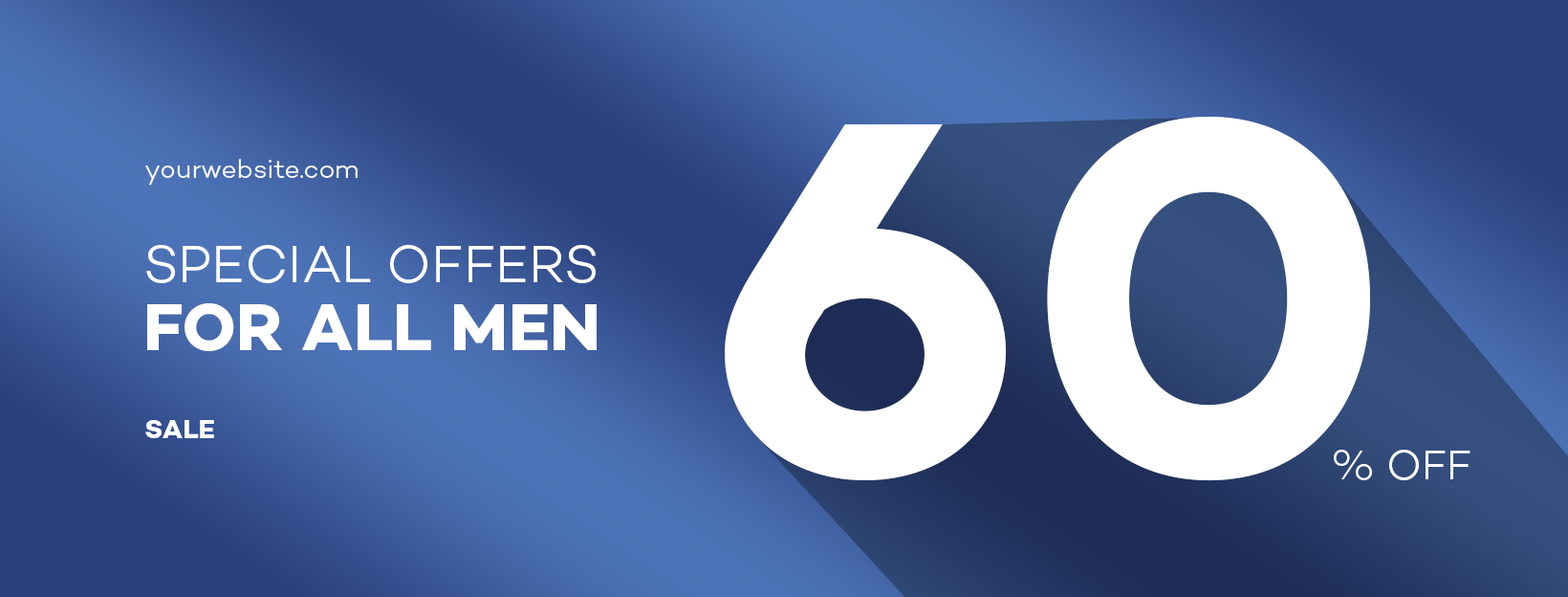
<style>
.page{position:relative;width:1568px;height:597px}
.page>*{position:absolute;margin:0}
.t1{font:511.5px "Campton-BoldDEMO";color:#ffffff;text-transform:uppercase}
.t2{font:26.8px "Campton-LightDEMO";color:#ffffff}
.t3{font:53.5px/67.9px "Campton-LightDEMO";color:#ffffff;text-transform:uppercase}
.t4{font:67.9px/67.9px "Campton-BoldDEMO";color:#ffffff;text-transform:uppercase}
.t5{font:26.8px "Campton-BoldDEMO";color:#ffffff;text-transform:uppercase}
.t6{font:42.1px "Campton-LightDEMO";color:#ffffff}
</style>
<div class="page">
<p class="t1" style="left:725px;top:116px;width:645px;height:365px">60</p>
<p class="t2" style="left:145px;top:159px;width:213px;height:26px">yourwebsite.com</p>
<p class="t3" style="left:146px;top:245px;width:451px;height:106px">special offers<br><span class="t4">for All men</span></p>
<p class="t5" style="left:145px;top:420px;width:69px;height:18px">Sale</p>
<p class="t6" style="left:1334px;top:449px;width:136px;height:31px">% OFF</p>
</div>
